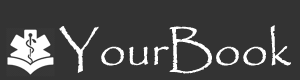
<style>
.page{position:relative;width:300px;height:80px;background:#333333}
.page>*{position:absolute;margin:0}
.t1{font:48px "Papyrus-Regular";color:#ffffff}
</style>
<div class="page">
<p class="t1" style="left:59px;top:25px;width:232px;height:49px">YourBook</p>
</div>
